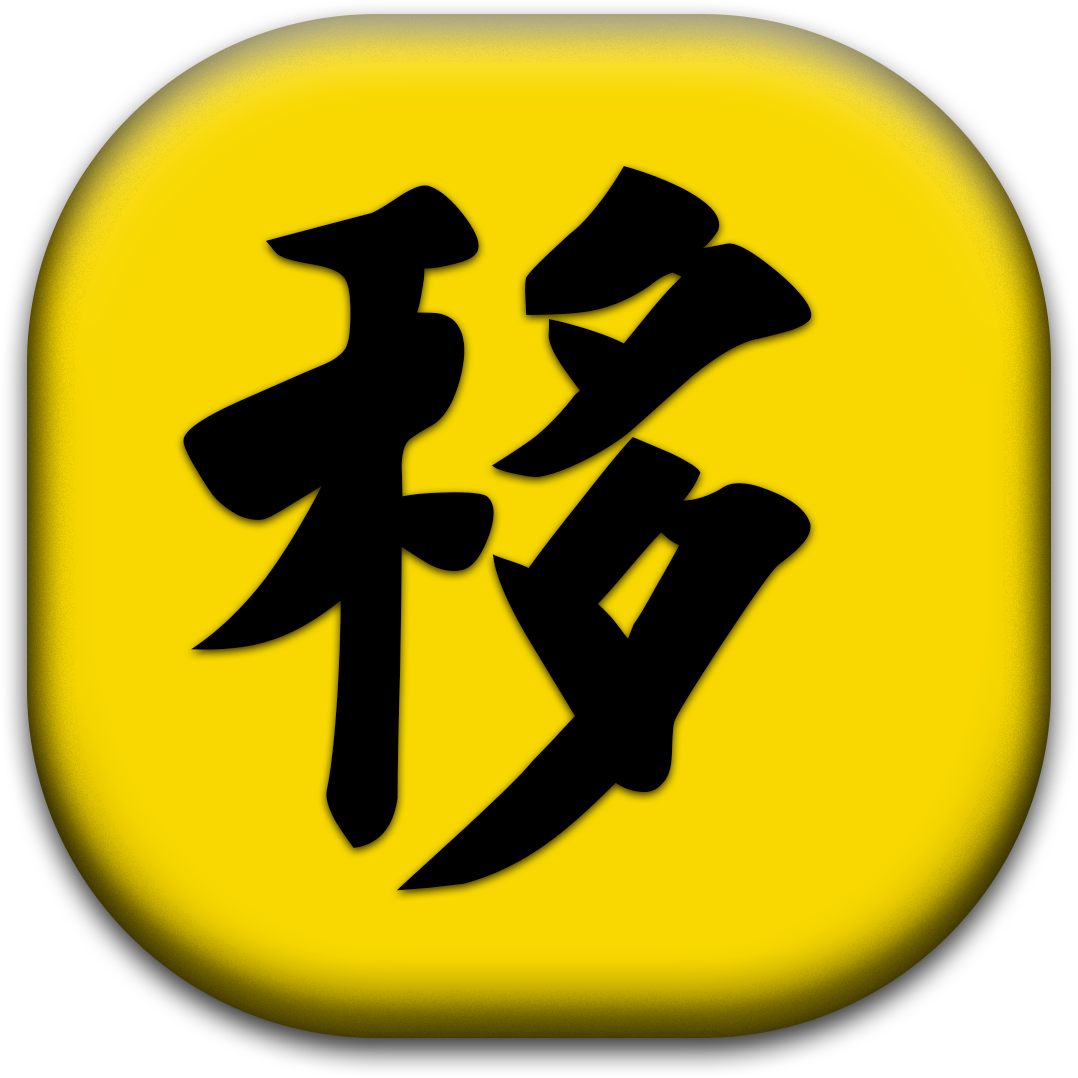
<style>
.page{position:relative;width:1078px;height:1078px;background:#f8d800}
.page>*{position:absolute;margin:0}
.t1{font:833.3px "¾­µä·±Ã«¿¬ Regular";color:#000000}
</style>
<div class="page">
<p class="t1" style="left:183px;top:166px;width:629px;height:725px">移</p>
</div>
